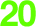
<style>
.page{position:relative;width:37px;height:27px;background:#60fe01}
.page>*{position:absolute;margin:0}
.t1{font:36px "Helvetica-Bold";letter-spacing:-0.05em;color:#60fe01}
</style>
<div class="page">
<p class="t1" style="left:0px;top:0px;width:36px;height:27px">20</p>
</div>
